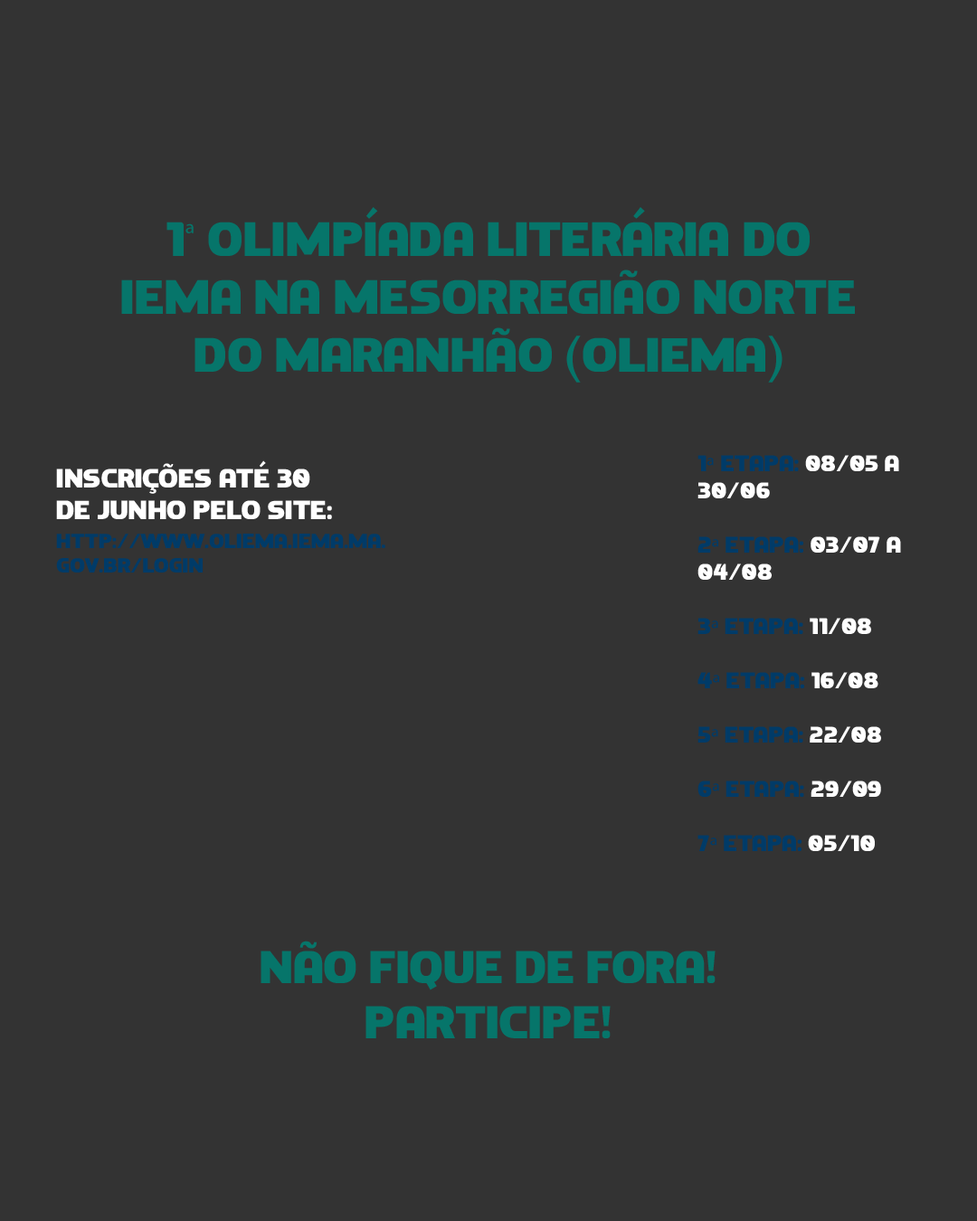
<style>
.page{position:relative;width:977px;height:1221px;background:#333333}
.page>*{position:absolute;margin:0}
.t1{font:48.1px "Dove-Regular";color:#06756a}
.t2{font:48.1px "MyriadPro-Regular";color:#06756a}
.t3{font:26.4px "Dove-Regular";color:#ffffff}
.t4{font:22.6px "Dove-Regular";color:#ffffff}
.t5{font:22.6px "Dove-Regular";color:#003b68}
.t6{font:22.6px "MyriadPro-Regular";color:#003b68}
.t7{font:20.4px "Dove-Regular";color:#003b68}
.t8{font:45.8px "Dove-Regular";color:#06756a}
</style>
<div class="page">
<p class="t1" style="left:121px;top:207px;width:734px;height:176px;text-align:center">1<span class="t2">ª</span> Olimpíada Literária do IEMA na mesorregião norte do Maranhão (OLIEMA)</p>
<p class="t3" style="left:56px;top:460px;width:276px;height:59px">inscrições até 30 de Junho pelo site:</p>
<p class="t4" style="left:697px;top:455px;width:204px;height:396px"><span class="t5">1</span><span class="t6">ª</span><span class="t5"> Etapa: </span>08/05 A  30/06<br><span class="t5"><br>2</span><span class="t6">ª</span><span class="t5"> Etapa:</span> 03/07 a 04/08<br><span class="t5"><br>3</span><span class="t6">ª</span><span class="t5"> Etapa: </span>11/08<br><span class="t5"><br>4</span><span class="t6">ª</span><span class="t5"> Etapa: </span>16/08<br><span class="t5"><br>5</span><span class="t6">ª</span><span class="t5"> Etapa: </span>22/08<br><span class="t5"><br>6</span><span class="t6">ª</span><span class="t5"> Etapa:</span> 29/09<br><span class="t5"><br>7</span><span class="t6">ª</span><span class="t5"> Etapa: </span>05/10</p>
<p class="t7" style="left:56px;top:534px;width:329px;height:38px">http://www.oliema.IEMA.ma.<br>gov.br/login</p>
<p class="t8" style="left:260px;top:941px;width:455px;height:97px;text-align:center">Não fique de fora! Participe!</p>
</div>
